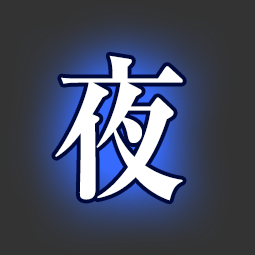
<style>
.page{position:relative;width:255px;height:255px;background:#333333}
.page>*{position:absolute;margin:0}
.t1{font:156px "RyuminPro-ExBold";letter-spacing:-0.08em;color:#ffffff;scale:0.88 1}
</style>
<div class="page">
<p class="t1" style="left:55px;top:55px;width:128px;height:146px">夜</p>
</div>
